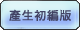
<style>
.page{position:relative;width:80px;height:30px}
.page>*{position:absolute;margin:0}
.t1{font:12px "DFHei-Bd-HK-BF";letter-spacing:0.05em;color:#424363}
</style>
<div class="page">
<p class="t1" style="left:9px;top:9px;width:62px;height:12px">產生初編版</p>
</div>
